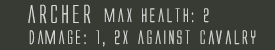
<style>
.page{position:relative;width:275px;height:50px;background:#383b33}
.page>*{position:absolute;margin:0}
.t1{font:24px "AlienLeague";color:#dbdada}
.t2{font:18px "AlienLeague";color:#dbdada}
</style>
<div class="page">
<p class="t1" style="left:28px;top:4px;width:63px;height:20px">archer</p>
<p class="t2" style="left:29px;top:8px;width:227px;height:39px;text-align:center">max health: 2<br>damage: 1, 2x against cavalry</p>
</div>
